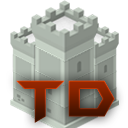
<style>
.page{position:relative;width:128px;height:128px;background:#ffffff}
.page>*{position:absolute;margin:0}
.t1{font:60px "BatmanForeverAlternate"}
</style>
<div class="page">
<p class="t1" style="left:16px;top:80px;width:99px;height:43px">TD</p>
</div>
